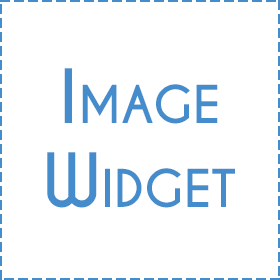
<style>
.page{position:relative;width:280px;height:280px;background:#ffffff}
.page>*{position:absolute;margin:0}
.t1{font:70px "CaviarDreams-Bold";color:#448ccb;font-variant:small-caps}
</style>
<div class="page">
<p class="t1" style="left:47px;top:68px;width:188px;height:140px;text-align:center">Image<br>Widget</p>
</div>
